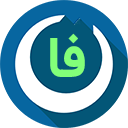
<style>
.page{position:relative;width:128px;height:128px;background:#ffffff}
.page>*{position:absolute;margin:0}
.t1{font:55.4px "Vazir-Bold";color:#82ff79}
</style>
<div class="page">
<p class="t1" style="left:50px;top:33px;width:35px;height:44px">فا</p>
</div>
